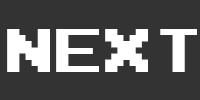
<style>
.page{position:relative;width:200px;height:100px;background:#333333}
.page>*{position:absolute;margin:0}
.t1{font:48.7px "Emulogic";color:#ffffff}
</style>
<div class="page">
<p class="t1" style="left:7px;top:29px;width:190px;height:43px">next</p>
</div>
